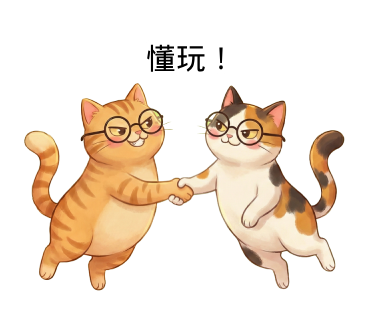
<style>
.page{position:relative;width:370px;height:320px;background:#ffffff}
.page>*{position:absolute;margin:0}
.t1{font:30px "DroidSansFallback";color:#000000}
</style>
<div class="page">
<p class="t1" style="left:147px;top:44px;width:76px;height:28px">懂玩！</p>
</div>
